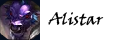
<style>
.page{position:relative;width:140px;height:40px;background:#ffffff}
.page>*{position:absolute;margin:0}
.t1{font:12px "VinerHandITC";color:#000000}
</style>
<div class="page">
<p class="t1" style="left:48px;top:12px;width:56px;height:14px">Alistar</p>
</div>
